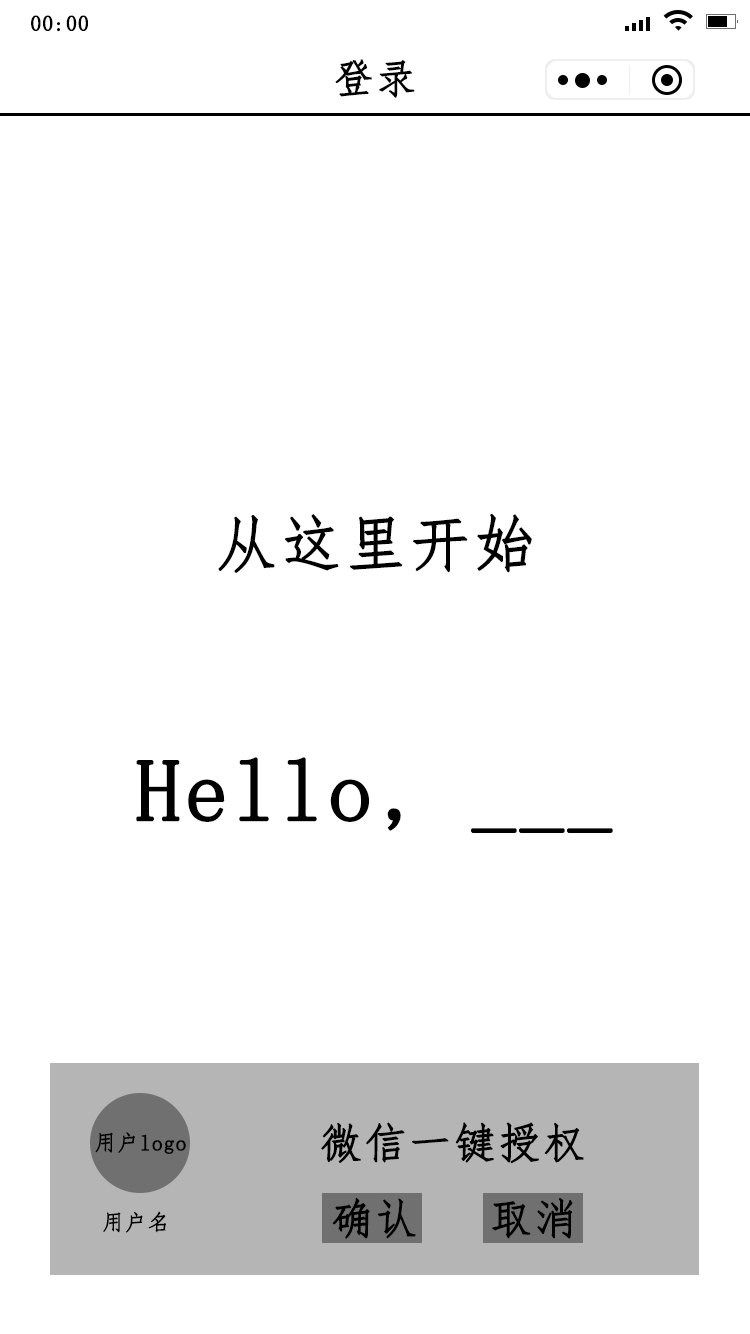
<style>
.page{position:relative;width:750px;height:1334px;background:#ffffff}
.page>*{position:absolute;margin:0}
.t1{font:21.7px "FangSong";letter-spacing:0.02em;color:#000000;font-weight:bold}
.t2{font:40.7px "FangSong";letter-spacing:0.02em;color:#000000;font-weight:bold}
.t3{font:61.7px "FangSong";letter-spacing:0.02em;color:#000000;font-weight:bold}
.t4{font:87.7px "FangSong";letter-spacing:0.02em;color:#000000;font-weight:bold}
.t5{font:42.7px "FangSong";letter-spacing:0.02em;color:#000000;font-weight:bold}
</style>
<div class="page">
<p class="t1" style="left:31px;top:15px;width:57px;height:17px">00:00</p>
<p class="t2" style="left:335px;top:59px;width:80px;height:39px">登录</p>
<p class="t3" style="left:218px;top:514px;width:314px;height:59px">从这里开始</p>
<p class="t4" style="left:136px;top:757px;width:477px;height:76px">Hello, ___</p>
<p class="t1" style="left:95px;top:1132px;width:91px;height:22px">用户logo</p>
<p class="t5" style="left:321px;top:1122px;width:263px;height:42px">微信一键授权</p>
<p class="t5" style="left:332px;top:1197px;width:84px;height:42px">确认</p>
<p class="t5" style="left:492px;top:1197px;width:81px;height:42px">取消</p>
<p class="t1" style="left:103px;top:1211px;width:63px;height:22px">用户名</p>
</div>
